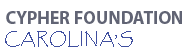
<style>
.page{position:relative;width:186px;height:54px;background:#ffffff}
.page>*{position:absolute;margin:0}
.t1{font:18px "MyriadPro-Bold";color:#616474}
.t2{font:16px "Papyrus-Regular";color:#3e4e9f}
</style>
<div class="page">
<p class="t1" style="left:6px;top:11px;width:176px;height:13px">CYPHER FOUNDATION</p>
<p class="t2" style="left:5px;top:31px;width:128px;height:16px">CAROLINA’S</p>
</div>
